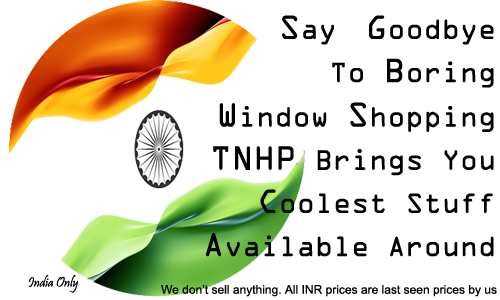
<style>
.page{position:relative;width:500px;height:300px;background:#ffffff}
.page>*{position:absolute;margin:0}
.t1{font:30px "OCRAExtended";color:#010101}
.t2{font:36px "OCRAExtended";color:#010101}
.t3{font:37px "OCRAExtended";color:#010101}
.t4{font:14px "Pristina-Regular";color:#010101}
.t5{font:12px "ArialMT";color:#010101}
</style>
<div class="page">
<p class="t1" style="left:206px;top:15px;width:288px;height:242px;text-align:right"><span class="t2">S</span>ay <span class="t2">G</span>oodbye<br>To <span class="t2">B</span>oring<br><span class="t2">W</span>indow <span class="t3">S</span>hopping<br><span class="t2">TNHP</span> Brings You<br><span class="t2">C</span>oolest Stuff<br><span class="t2">A</span>vailable Around</p>
<p class="t4" style="left:28px;top:275px;width:50px;height:18px">India Only</p>
<p class="t5" style="left:161px;top:285px;width:336px;height:12px">We don’t sell anything. All INR prices are last seen prices by us</p>
</div>
